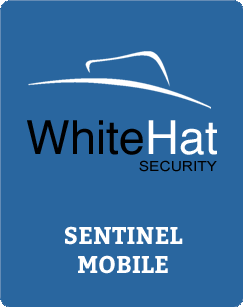
<style>
.page{position:relative;width:243px;height:307px;background:#29669f}
.page>*{position:absolute;margin:0}
.t1{font:46.7px "Helvetica";color:#000000}
.t2{font:46.7px "Helvetica";color:#ffffff}
.t3{font:13.8px "ArialMT";color:#000000;scale:1.12 1}
.t4{font:24px "Bitter-Bold";color:#ffffff}
</style>
<div class="page">
<p class="t1" style="left:27px;top:120px;width:190px;height:35px">White<span class="t2">Hat</span></p>
<p class="t3" style="left:139px;top:160px;width:78px;height:12px">SECURITY</p>
<p class="t4" style="left:65px;top:226px;width:118px;height:48px;text-align:center">SENTINEL<br>MOBILE</p>
</div>
